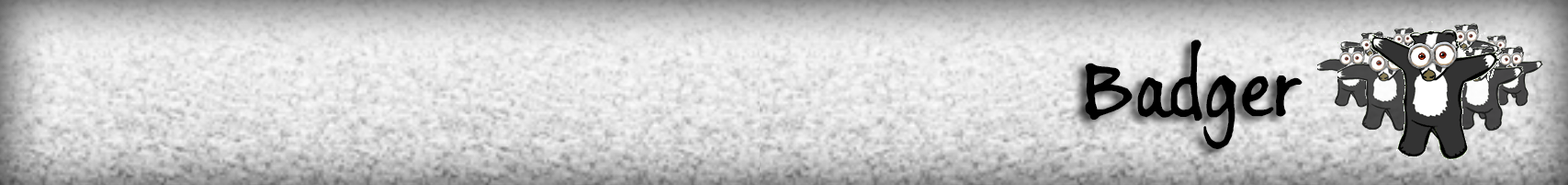
<style>
.page{position:relative;width:1568px;height:185px}
.page>*{position:absolute;margin:0}
.t1{font:88.2px "BuxtonSketch";color:#000000}
</style>
<div class="page">
<p class="t1" style="left:1085px;top:39px;width:218px;height:110px">Badger</p>
</div>
